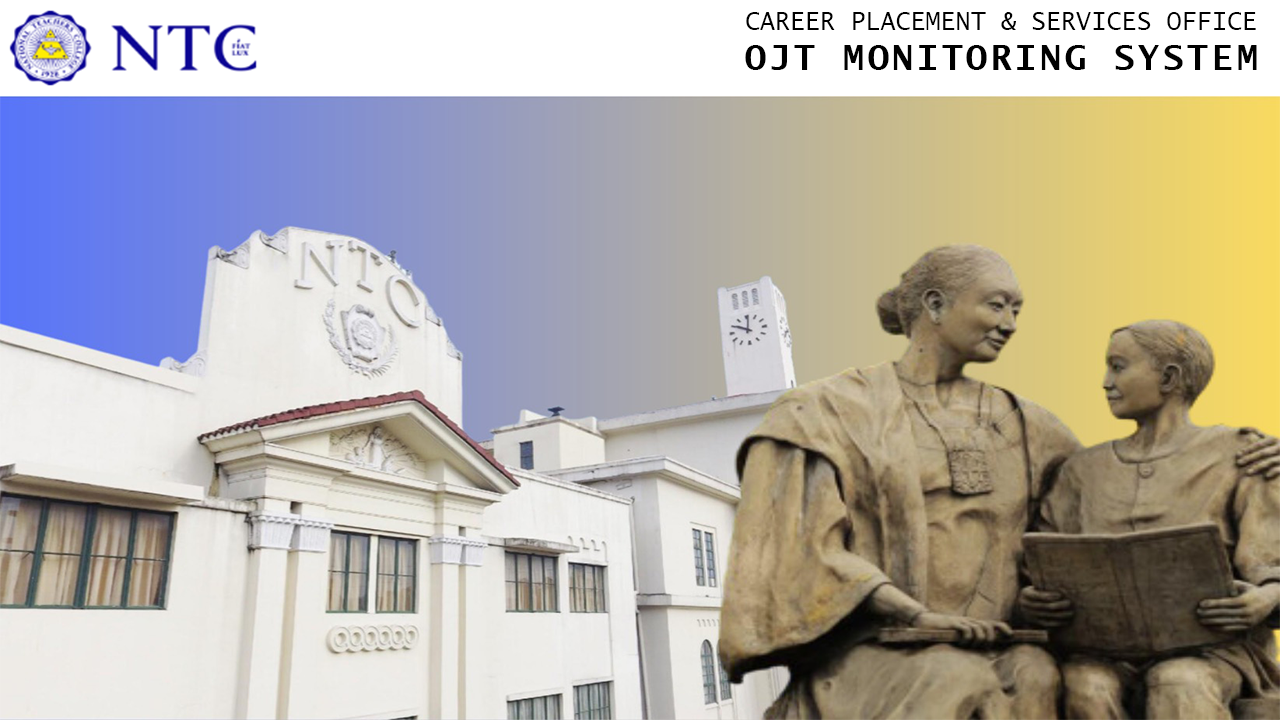
<style>
.page{position:relative;width:1280px;height:720px}
.page>*{position:absolute;margin:0}
.t1{font:25px "LucidaSans-Typewriter";color:#000000}
.t2{font:35px "LucidaSans-TypewriterBold";letter-spacing:0.1em;color:#000000}
</style>
<div class="page">
<p class="t1" style="left:746px;top:12px;width:510px;height:18px">CAREER PLACEMENT &amp; SERVICES OFFICE</p>
<p class="t2" style="left:745px;top:45px;width:512px;height:25px">OJT MONITORING SYSTEM</p>
</div>
